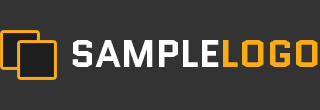
<style>
.page{position:relative;width:320px;height:110px;background:#333333}
.page>*{position:absolute;margin:0}
.t1{font:38.6px "Quantico-Bold";color:#ffffff}
.t2{font:38.6px "Quantico-Bold";color:#faab1a}
</style>
<div class="page">
<p class="t1" style="left:72px;top:40px;width:246px;height:27px">SAMPLE<span class="t2">LOGO</span></p>
</div>
